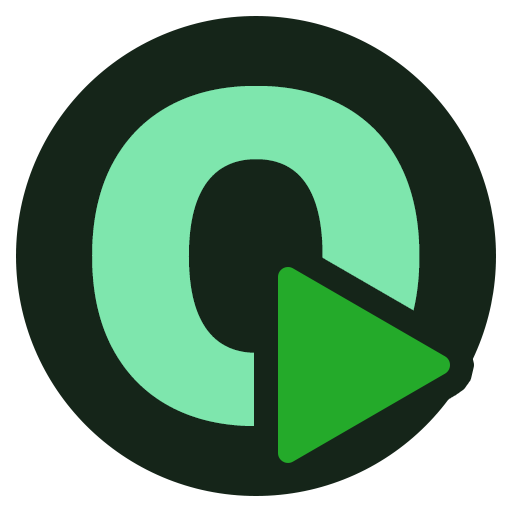
<style>
.page{position:relative;width:512px;height:512px;background:#152519}
.page>*{position:absolute;margin:0}
.t1{font:500px "WorkSansRoman_750.000wght_0ital";letter-spacing:0.04em;color:#7ee6ad;text-transform:uppercase;font-weight:bold}
</style>
<div class="page">
<p class="t1" style="left:92px;top:86px;width:328px;height:340px">O</p>
</div>
